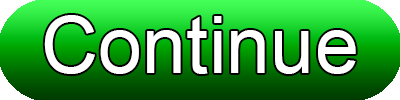
<style>
.page{position:relative;width:400px;height:100px}
.page>*{position:absolute;margin:0}
.t1{font:79.5px "ArialMT";color:#ffffff}
</style>
<div class="page">
<p class="t1" style="left:44px;top:15px;width:312px;height:59px">Continue</p>
</div>
